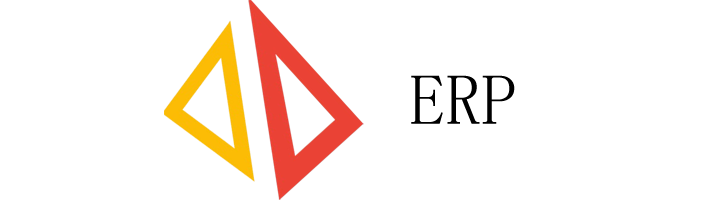
<style>
.page{position:relative;width:720px;height:200px;background:#ffffff}
.page>*{position:absolute;margin:0}
.t1{font:72px "YouYuan";color:#000000}
</style>
<div class="page">
<p class="t1" style="left:411px;top:75px;width:104px;height:49px">ERP</p>
</div>
